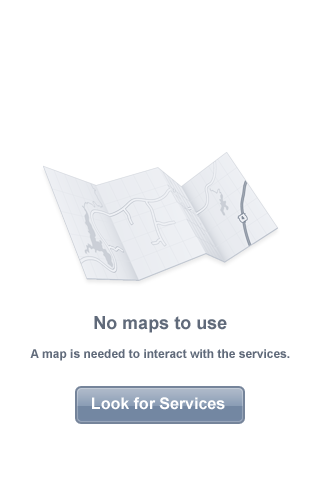
<style>
.page{position:relative;width:320px;height:480px;background:#ffffff}
.page>*{position:absolute;margin:0}
.t1{font:18px "Arial-BoldMT";color:#606a7a}
.t2{font:12px "Arial-BoldMT";color:#606a7a}
.t3{font:16px "Arial-BoldMT";color:#ffffff}
</style>
<div class="page">
<p class="t1" style="left:94px;top:316px;width:133px;height:17px">No maps to use</p>
<p class="t2" style="left:30px;top:349px;width:260px;height:12px">A map is needed to interact with the services.</p>
<p class="t3" style="left:92px;top:397px;width:133px;height:13px">Look for Services</p>
</div>
